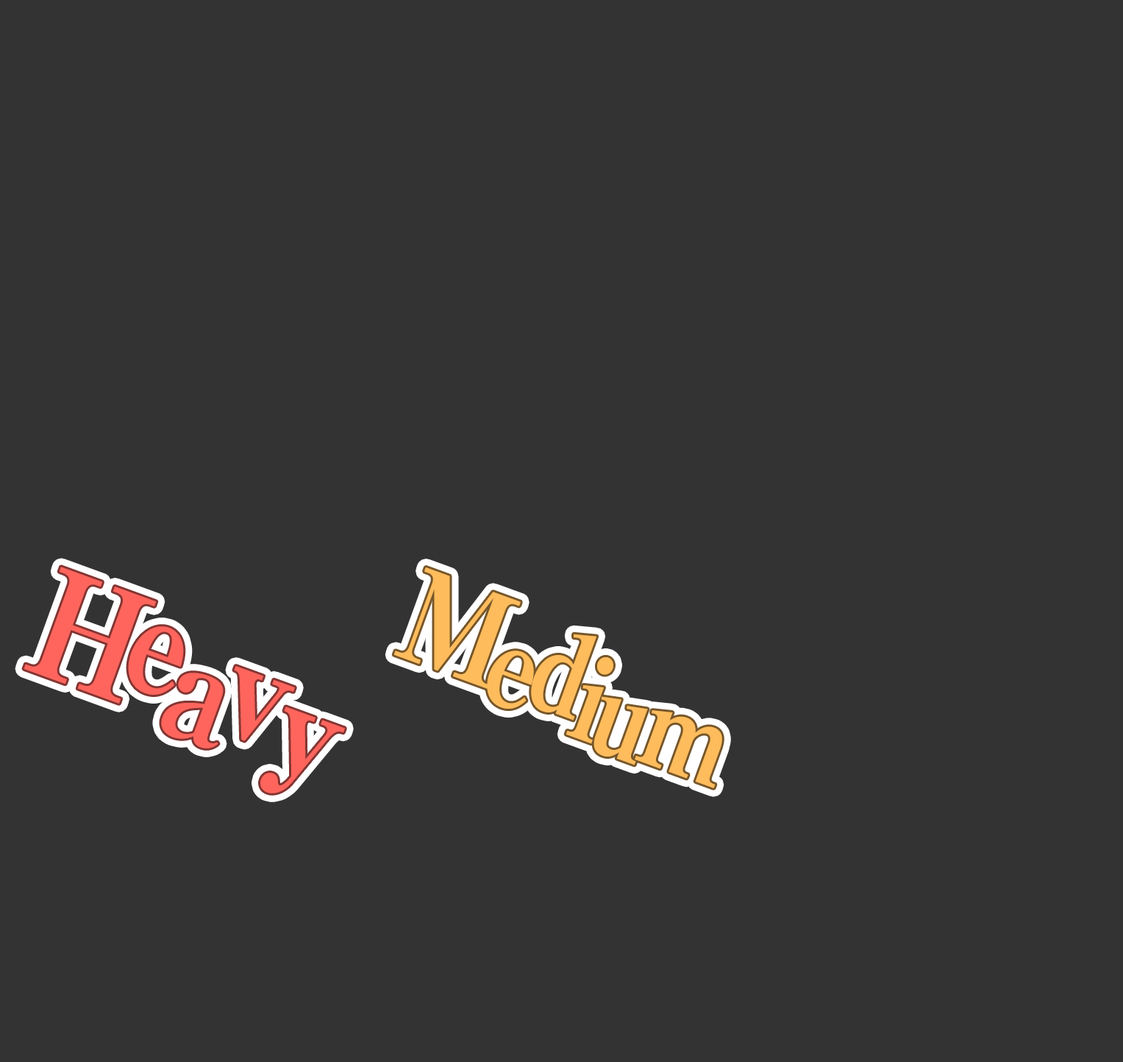
<style>
.page{position:relative;width:1123px;height:1062px;background:#333333}
.page>*{position:absolute;margin:0}
.t1{font:136.1px "RyuminPro-ExBold";letter-spacing:-0.08em;color:#ff655d;scale:0.9 1}
.t2{font:148.3px "RyuminPro-ExBold";letter-spacing:-0.08em;color:#ff655d;scale:0.9 1}
.t3{font:115.5px "RyuminPro-ExBold";letter-spacing:-0.08em;color:#ffbc5c;scale:0.9 1}
.t4{font:127.1px "RyuminPro-ExBold";letter-spacing:-0.08em;color:#ffbc5c;scale:0.9 1}
</style>
<div class="page">
<p class="t1" style="left:24px;top:566px;width:321px;height:227px;rotate:20deg"><span class="t2">H</span>eavy</p>
<p class="t3" style="left:394px;top:567px;width:328px;height:221px;rotate:20deg"><span class="t4">M</span>edium</p>
</div>
